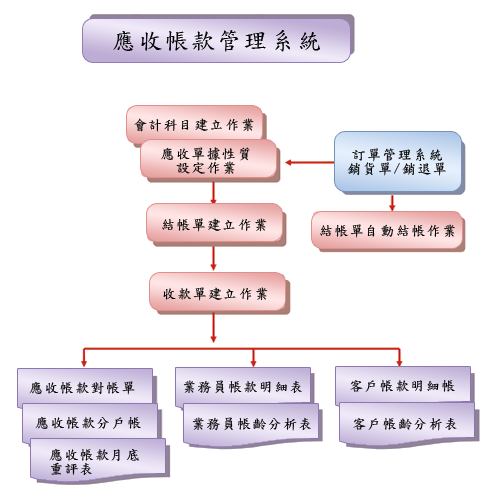
<style>
.page{position:relative;width:495px;height:500px;background:#ffffff}
.page>*{position:absolute;margin:0}
.t1{font:24px "DFKaiShu-SB-Estd-BF";letter-spacing:0.1em;color:#010101}
.t2{font:14px "DFKaiShu-SB-Estd-BF";letter-spacing:0.1em;color:#010101}
.t3{font:14px/14px "DFKaiShu-SB-Estd-BF";letter-spacing:0.1em;color:#010101}
</style>
<div class="page">
<p class="t1" style="left:113px;top:30px;width:207px;height:22px">應收帳款管理系統</p>
<p class="t2" style="left:134px;top:118px;width:120px;height:14px">會計科目建立作業</p>
<p class="t3" style="left:161px;top:147px;width:89px;height:27px;text-align:center">應收單據性質<br>設定作業</p>
<p class="t3" style="left:347px;top:148px;width:99px;height:28px;text-align:center">訂單管理系統<br>銷貨單/銷退單</p>
<p class="t2" style="left:162px;top:218px;width:105px;height:14px">結帳單建立作業</p>
<p class="t2" style="left:320px;top:224px;width:135px;height:14px">結帳單自動結帳作業</p>
<p class="t2" style="left:163px;top:287px;width:105px;height:14px">收款單建立作業</p>
<p class="t2" style="left:29px;top:381px;width:106px;height:14px">應收帳款對帳單</p>
<p class="t2" style="left:183px;top:380px;width:119px;height:14px">業務員帳款明細表</p>
<p class="t2" style="left:350px;top:380px;width:105px;height:12px">客戶帳款明細帳</p>
<p class="t2" style="left:35px;top:416px;width:106px;height:13px">應收帳款分戶帳</p>
<p class="t2" style="left:192px;top:417px;width:119px;height:14px">業務員帳齡分析表</p>
<p class="t2" style="left:353px;top:418px;width:104px;height:13px">客戶帳齡分析表</p>
<p class="t3" style="left:49px;top:448px;width:90px;height:27px">應收帳款月底<br>重評表</p>
</div>
